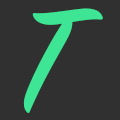
<style>
.page{position:relative;width:120px;height:120px;background:#303030}
.page>*{position:absolute;margin:0}
.t1{font:166.7px "SignPainter-HouseScript";color:#3de594}
</style>
<div class="page">
<p class="t1" style="left:23px;top:8px;width:80px;height:105px">T</p>
</div>
